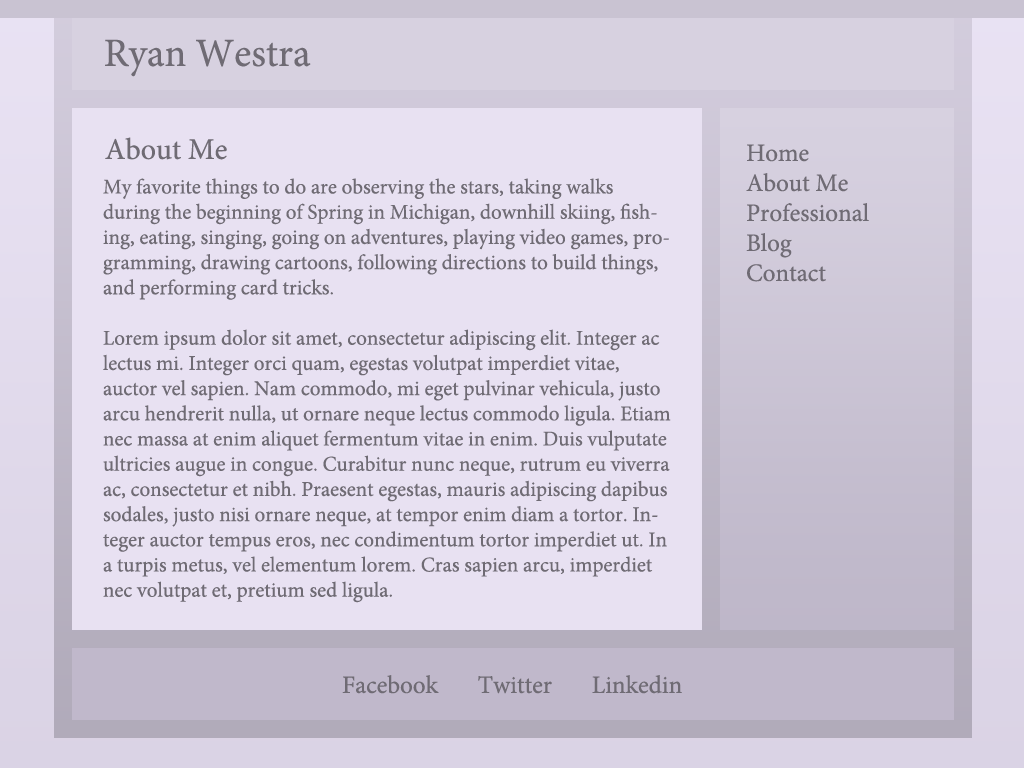
<style>
.page{position:relative;width:1024px;height:768px;background:#e8e1f2}
.page>*{position:absolute;margin:0}
.t1{font:40px "MinionPro-Regular";color:#6f6b74}
.t2{font:30px "MinionPro-Regular";color:#6f6b74}
.t3{font:25px "MinionPro-Regular";color:#6f6b74}
.t4{font:21px "MinionPro-Regular";color:#6f6b74}
</style>
<div class="page">
<p class="t1" style="left:105px;top:39px;width:206px;height:38px">Ryan Westra</p>
<p class="t2" style="left:105px;top:137px;width:122px;height:23px">About Me</p>
<p class="t3" style="left:746px;top:144px;width:123px;height:138px">Home<br>About Me<br>Professional<br>Blog<br>Contact</p>
<p class="t4" style="left:103px;top:178px;width:568px;height:425px">My favorite things to do are observing the stars, taking walks during the beginning of Spring in Michigan, downhill skiing, fishing, eating, singing, going on adventures, playing video games, programming, drawing cartoons, following directions to build things, and performing card tricks.<br><br>Lorem ipsum dolor sit amet, consectetur adipiscing elit. Integer ac lectus mi. Integer orci quam, egestas volutpat imperdiet vitae, auctor vel sapien. Nam commodo, mi eget pulvinar vehicula, justo arcu hendrerit nulla, ut ornare neque lectus commodo ligula. Etiam nec massa at enim aliquet fermentum vitae in enim. Duis vulputate ultricies augue in congue. Curabitur nunc neque, rutrum eu viverra ac, consectetur et nibh. Praesent egestas, mauris adipiscing dapibus sodales, justo nisi ornare neque, at tempor enim diam a tortor. Integer auctor tempus eros, nec condimentum tortor imperdiet ut. In a turpis metus, vel elementum lorem. Cras sapien arcu, imperdiet nec volutpat et, pretium sed ligula.</p>
<p class="t3" style="left:342px;top:675px;width:340px;height:19px">Facebook       Twitter       Linkedin</p>
</div>
